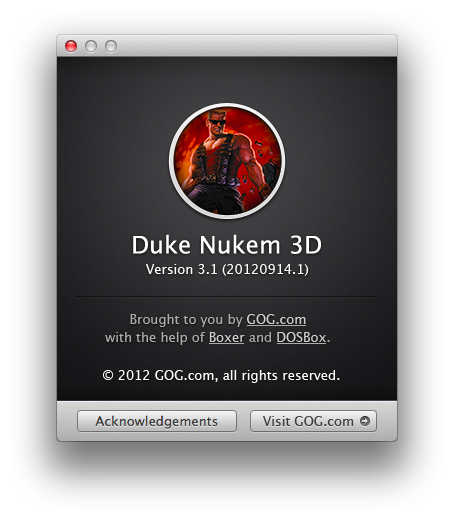
<style>
.page{position:relative;width:454px;height:520px}
.page>*{position:absolute;margin:0}
.t1{font:24px "LucidaGrande";color:#ffffff}
.t2{font:13px "LucidaGrande";color:#ffffff}
.t3{font:13px/18px "LucidaGrande";color:#acacac}
.t4{font:13px/18px "LucidaGrande";color:#cfcfcf}
.t5{font:13px "LucidaGrande";color:#3f3f3f}
</style>
<div class="page">
<p class="t1" style="left:133px;top:234px;width:188px;height:20px">Duke Nukem 3D</p>
<p class="t2" style="left:146px;top:264px;width:163px;height:12px">Version 3.1 (20120914.1)</p>
<p class="t3" style="left:105px;top:314px;width:225px;height:31px;text-align:center">Brought to you by <span class="t4">GOG.com<br></span>with the help of <span class="t4">Boxer</span> and <span class="t4">DOSBox</span>.</p>
<p class="t2" style="left:103px;top:370px;width:237px;height:13px">© 2012 GOG.com, all rights reserved.</p>
<p class="t5" style="left:263px;top:416px;width:91px;height:10px">Visit GOG.com</p>
</div>
